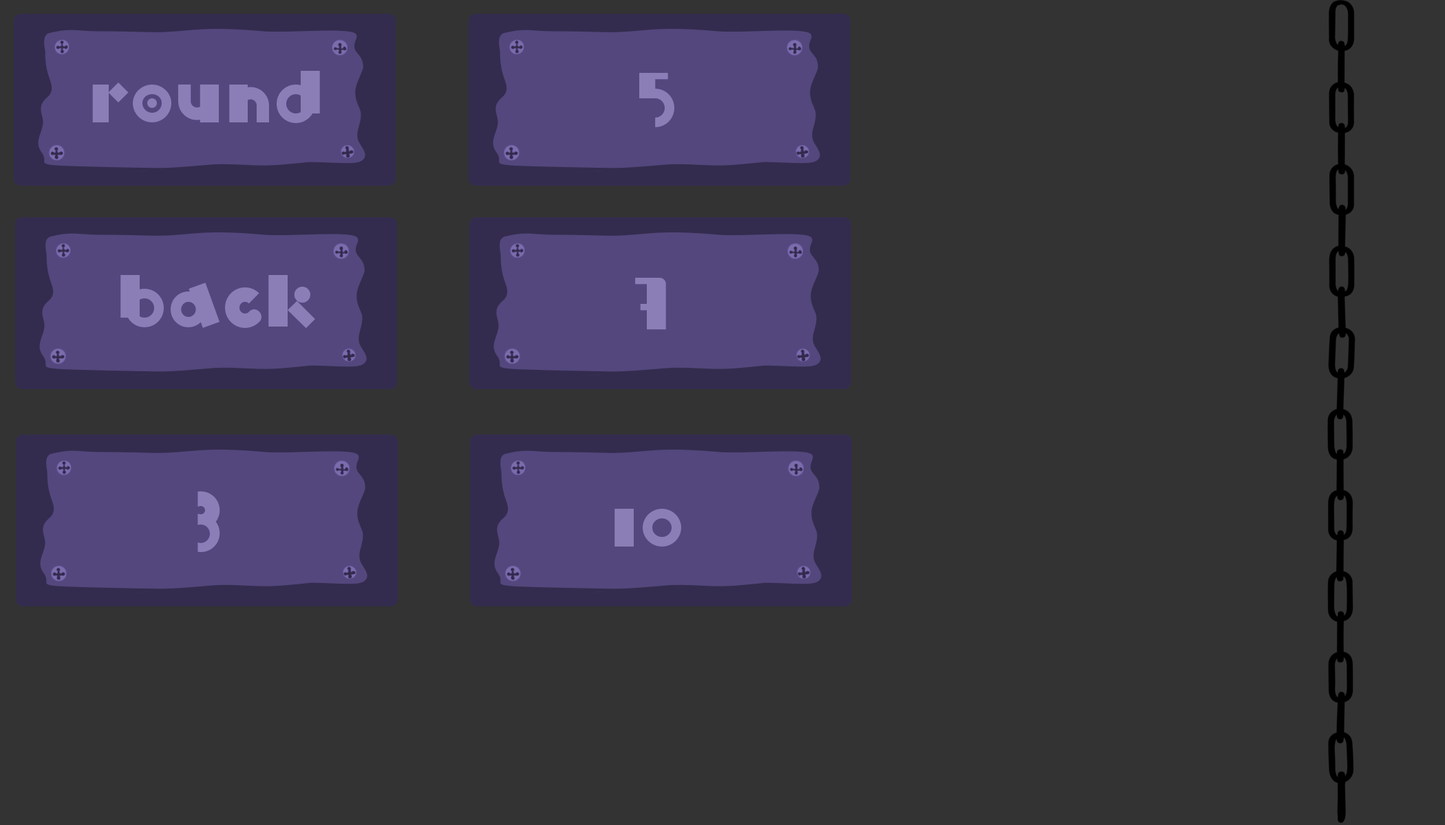
<style>
.page{position:relative;width:1445px;height:825px;background:#333333}
.page>*{position:absolute;margin:0}
.t1{font:86px "Blix-Black";color:#8b7eb6}
</style>
<div class="page">
<p class="t1" style="left:92px;top:71px;width:228px;height:52px">round</p>
<p class="t1" style="left:639px;top:73px;width:35px;height:54px">5</p>
<p class="t1" style="left:120px;top:275px;width:195px;height:54px">back</p>
<p class="t1" style="left:635px;top:278px;width:31px;height:52px">7</p>
<p class="t1" style="left:197px;top:491px;width:23px;height:61px">3</p>
<p class="t1" style="left:614px;top:509px;width:67px;height:38px">10</p>
</div>
